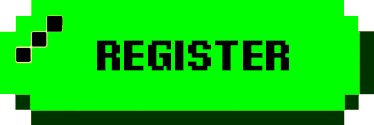
<style>
.page{position:relative;width:374px;height:125px;background:#00ff00}
.page>*{position:absolute;margin:0}
.t1{font:74.2px "PixelDigivolve";letter-spacing:0.015em;color:#000000;font-weight:bold;scale:0.87 1}
</style>
<div class="page">
<p class="t1" style="left:97px;top:40px;width:192px;height:31px">Register</p>
</div>
